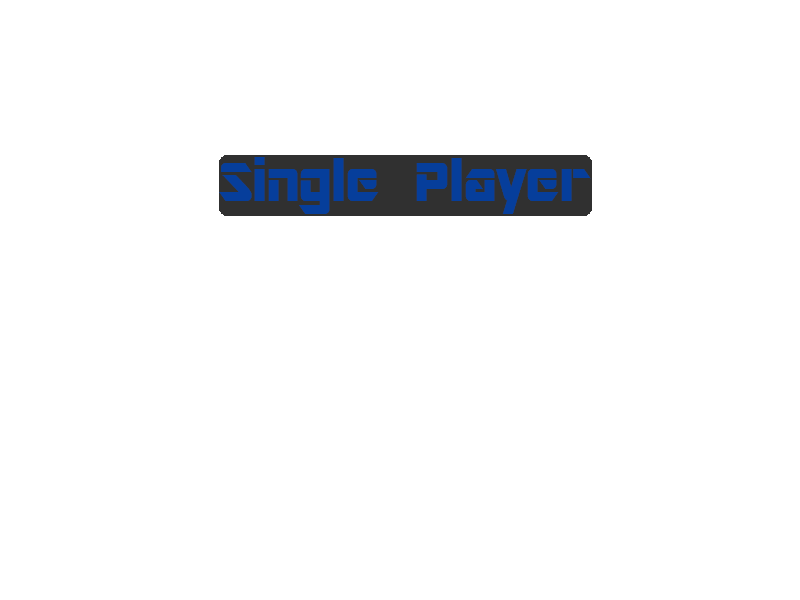
<style>
.page{position:relative;width:800px;height:600px;background:#ffffff}
.page>*{position:absolute;margin:0}
.t1{font:60px "ARDESTINE";color:#063e9b}
</style>
<div class="page">
<p class="t1" style="left:219px;top:157px;width:372px;height:57px">Single Player</p>
</div>
